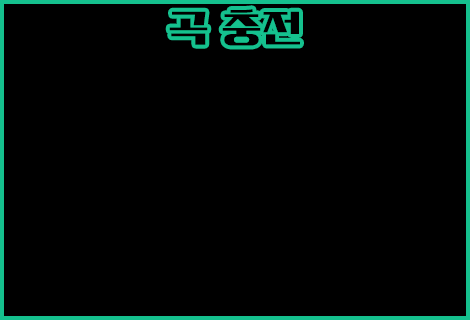
<style>
.page{position:relative;width:470px;height:320px;background:#000000}
.page>*{position:absolute;margin:0}
.t1{font:41.7px "KoreanPST-M";color:#000000}
</style>
<div class="page">
<p class="t1" style="left:169px;top:9px;width:131px;height:37px">곡 충전</p>
</div>
